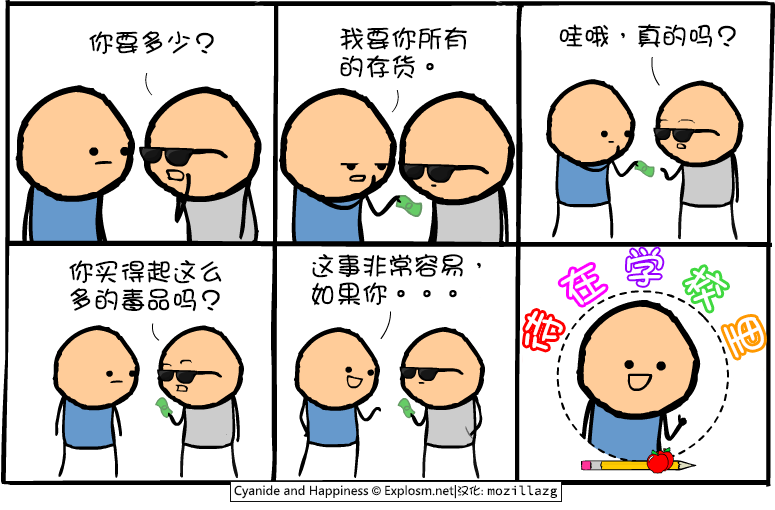
<style>
.page{position:relative;width:775px;height:510px;background:#ffffff}
.page>*{position:absolute;margin:0}
.t1{font:26px/28px "DFGirl";color:#000000}
.t2{font:26px "DFGirl";color:#000000}
.t3{font:42px "DFGirl";color:#ffffff}
</style>
<div class="page">
<p class="t1" style="left:340px;top:27px;width:128px;height:52px">我要你所有<br>的存货。</p>
<p class="t2" style="left:559px;top:24px;width:177px;height:24px">哇哦，真的吗？</p>
<p class="t2" style="left:89px;top:31px;width:125px;height:24px">你要多少？</p>
<p class="t1" style="left:312px;top:253px;width:169px;height:53px">这事非常容易，<br>如果你。。。</p>
<p class="t3" style="left:627px;top:248px;width:36px;height:38px">学</p>
<p class="t1" style="left:69px;top:260px;width:153px;height:52px">你买得起这么<br>多的毒品吗？</p>
<p class="t3" style="left:560px;top:265px;width:46px;height:40px">在</p>
<p class="t3" style="left:685px;top:267px;width:42px;height:44px">校</p>
<p class="t3" style="left:525px;top:311px;width:38px;height:39px">待</p>
<p class="t3" style="left:723px;top:317px;width:41px;height:41px">里</p>
</div>
